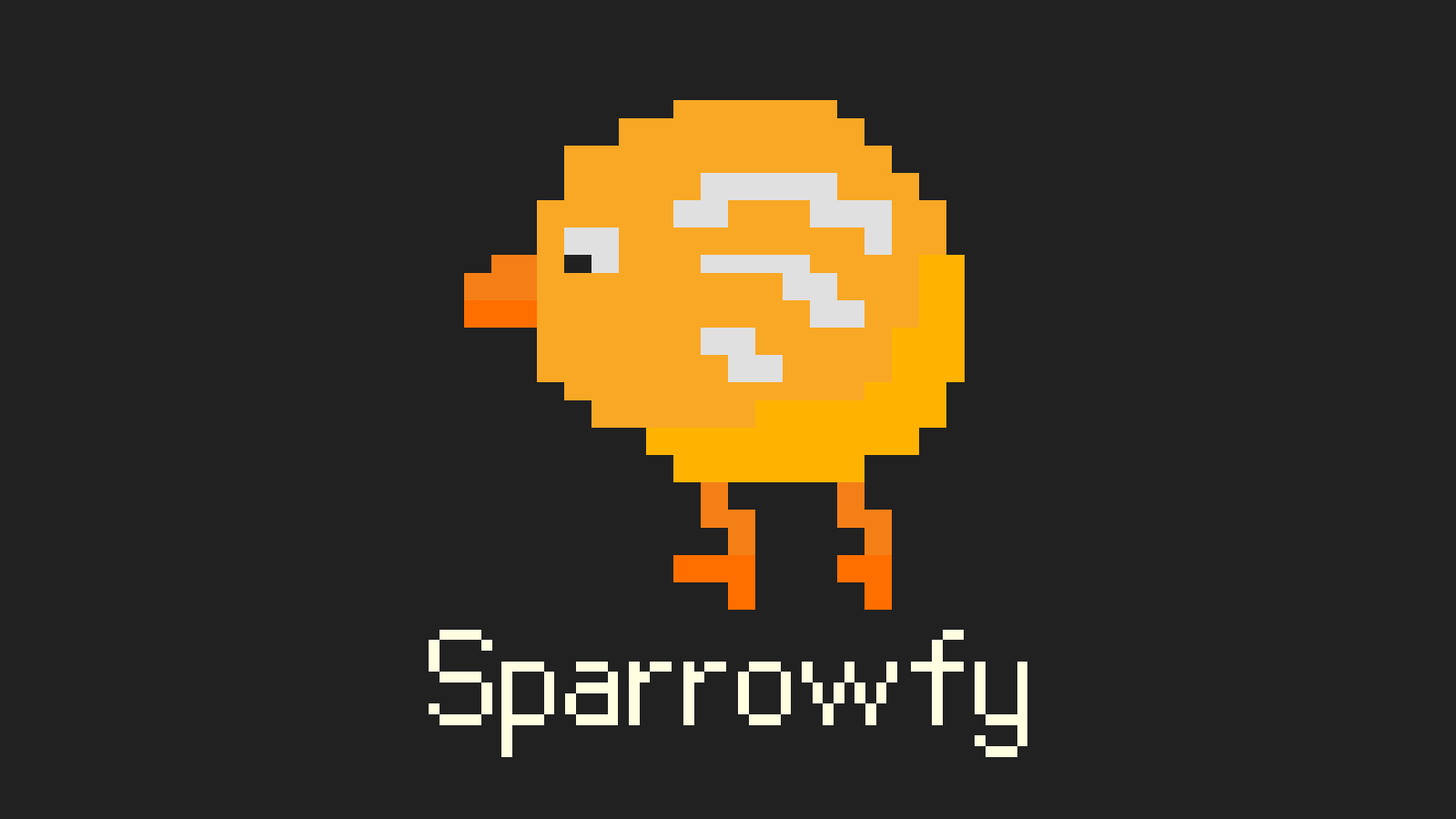
<style>
.page{position:relative;width:1456px;height:819px;background:#212121}
.page>*{position:absolute;margin:0}
.t1{font:127.4px "Cubic_11";color:#fffee0}
</style>
<div class="page">
<p class="t1" style="left:429px;top:630px;width:598px;height:127px">Sparrowfy</p>
</div>
